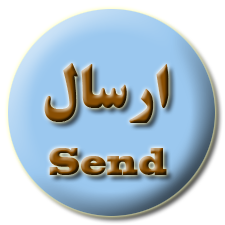
<style>
.page{position:relative;width:225px;height:225px;background:#ffffff}
.page>*{position:absolute;margin:0}
.t1{font:60px "BTitrBold"}
.t2{font:36px "BlackoakStd";scale:0.55 1}
</style>
<div class="page">
<p class="t1" style="left:44px;top:63px;width:125px;height:60px">ارسال</p>
<p class="t2" style="left:49px;top:148px;width:118px;height:27px">Send</p>
</div>
